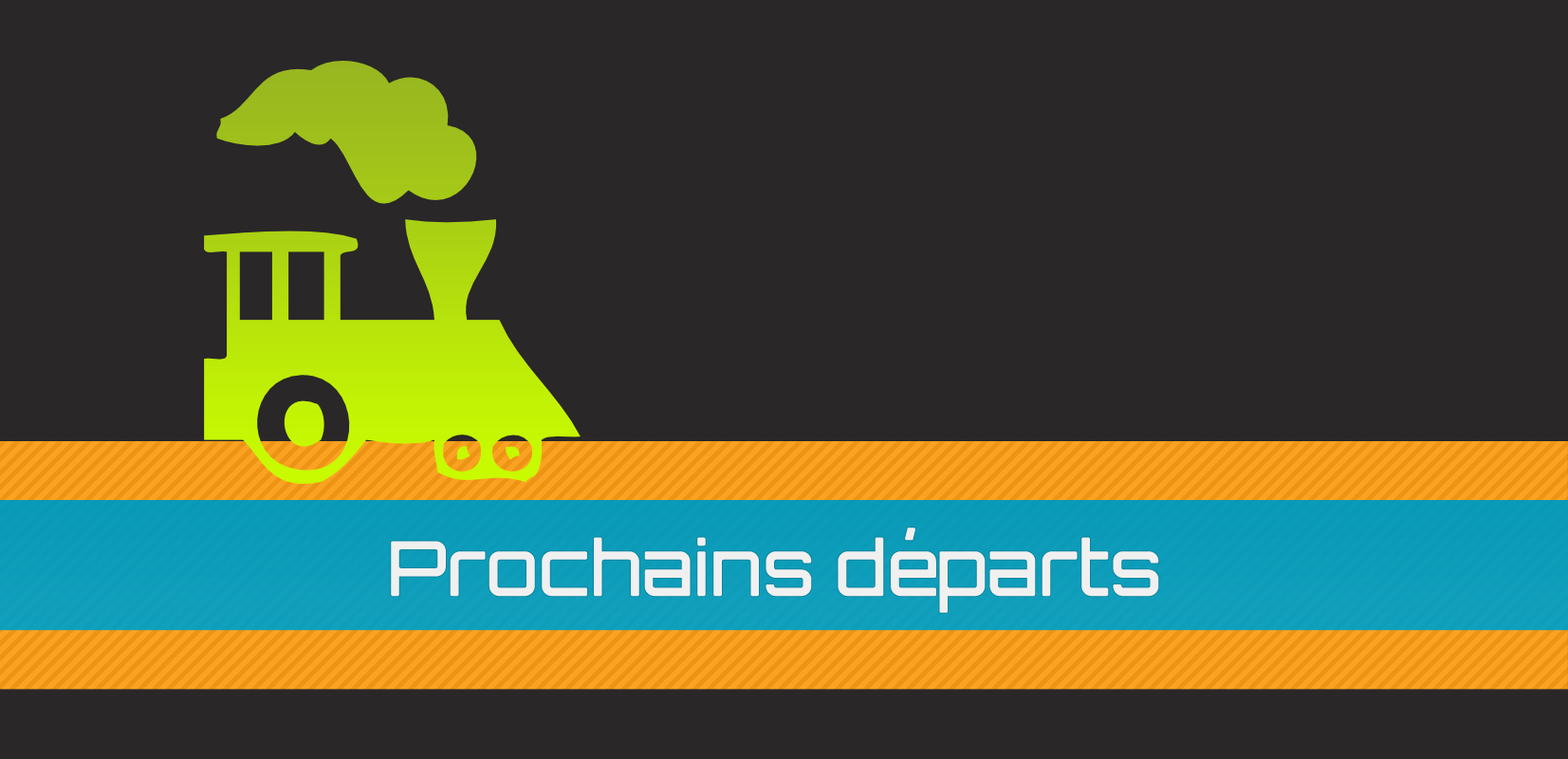
<style>
.page{position:relative;width:1568px;height:759px;background:#292728}
.page>*{position:absolute;margin:0}
.t1{font:73px "Orbitron-Light";color:#f0f0f0;font-weight:bold}
</style>
<div class="page">
<p class="t1" style="left:391px;top:527px;width:768px;height:86px">Prochains départs</p>
</div>
